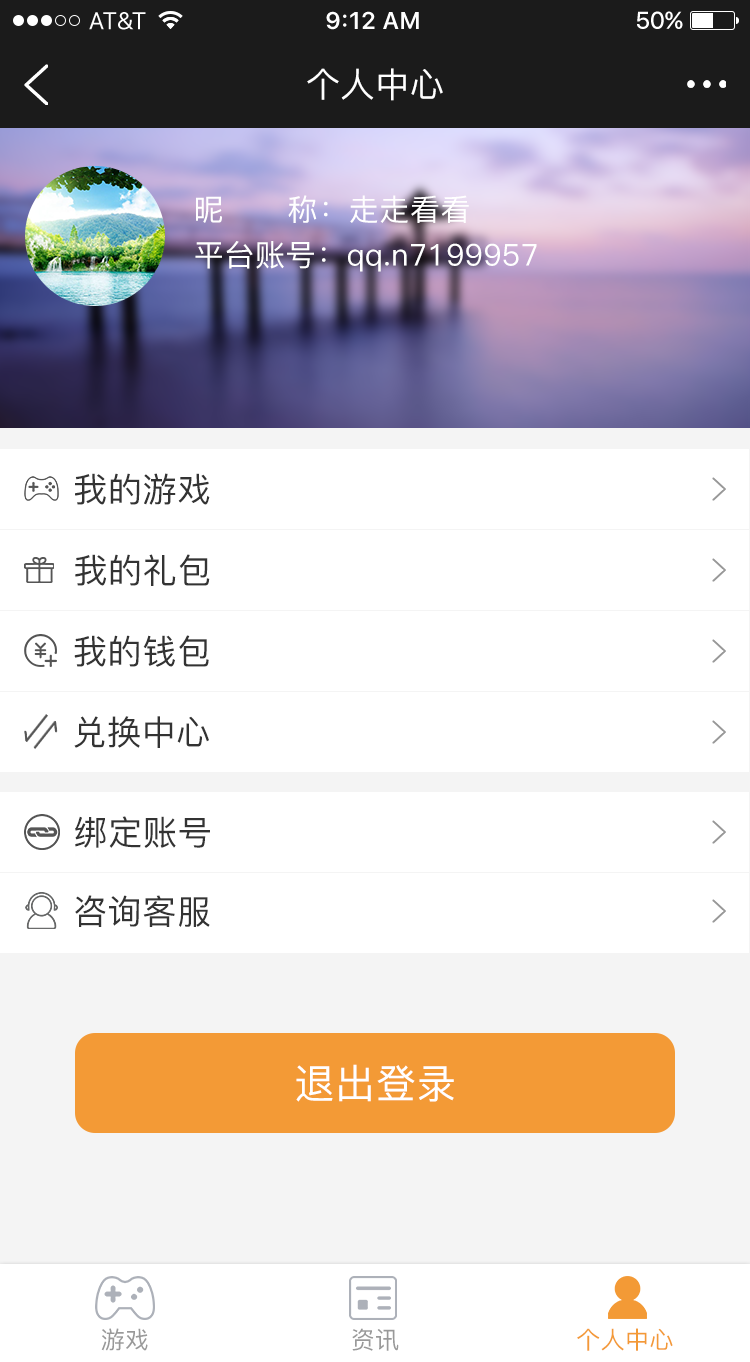
<style>
.page{position:relative;width:750px;height:1362px;background:#ffffff}
.page>*{position:absolute;margin:0}
.t1{font:34px "PingFang-SC-Medium";letter-spacing:0.02em;color:#ffffff}
.t2{font:30px "PingFang-SC-Medium";letter-spacing:0.02em;color:#ffffff}
.t3{font:34px "PingFang-SC-Medium";letter-spacing:0.02em;color:#333333}
.t4{font:40px "PingFang-SC-Medium";letter-spacing:0.02em;color:#ffffff}
.t5{font:24px "PingFang-SC-Medium";letter-spacing:0.02em;color:#999999}
.t6{font:24px "PingFang-SC-Medium";letter-spacing:0.02em;color:#f39a36}
</style>
<div class="page">
<p class="t1" style="left:307px;top:68px;width:136px;height:33px">个人中心</p>
<p class="t2" style="left:196px;top:195px;width:273px;height:28px">昵      称：走走看看</p>
<p class="t2" style="left:195px;top:241px;width:342px;height:31px">平台账号：qq.n7199957</p>
<p class="t3" style="left:75px;top:473px;width:135px;height:32px">我的游戏</p>
<p class="t3" style="left:75px;top:554px;width:135px;height:32px">我的礼包</p>
<p class="t3" style="left:74px;top:635px;width:135px;height:32px">我的钱包</p>
<p class="t3" style="left:74px;top:716px;width:135px;height:32px">兑换中心</p>
<p class="t3" style="left:75px;top:816px;width:135px;height:32px">绑定账号</p>
<p class="t3" style="left:75px;top:895px;width:135px;height:32px">咨询客服</p>
<p class="t4" style="left:296px;top:1064px;width:158px;height:38px">退出登录</p>
<p class="t5" style="left:101px;top:1328px;width:47px;height:23px">游戏</p>
<p class="t5" style="left:352px;top:1328px;width:47px;height:23px">资讯</p>
<p class="t6" style="left:577px;top:1328px;width:96px;height:23px">个人中心</p>
</div>
